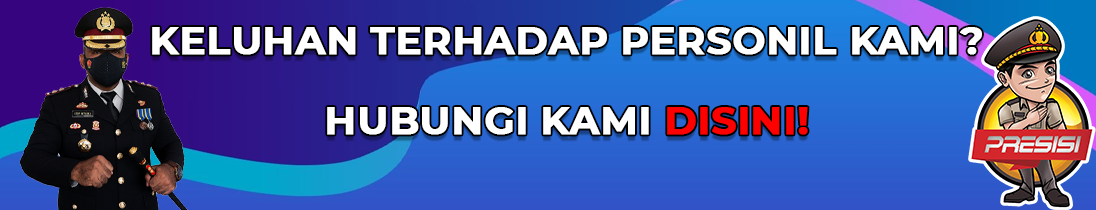
<style>
.page{position:relative;width:1096px;height:210px}
.page>*{position:absolute;margin:0}
.t1{font:66.7px "Montserrat-Bold";color:#ffffff;font-weight:bold}
.t2{font:66.7px "Montserrat-Bold";color:#ff0000;font-weight:bold}
</style>
<div class="page">
<p class="t1" style="left:152px;top:27px;width:830px;height:108px;text-align:center">KELUHAN TERHADAP PERSONIL KAMI?<br>HUBUNGI KAMI <span class="t2">DISINI!</span></p>
</div>
